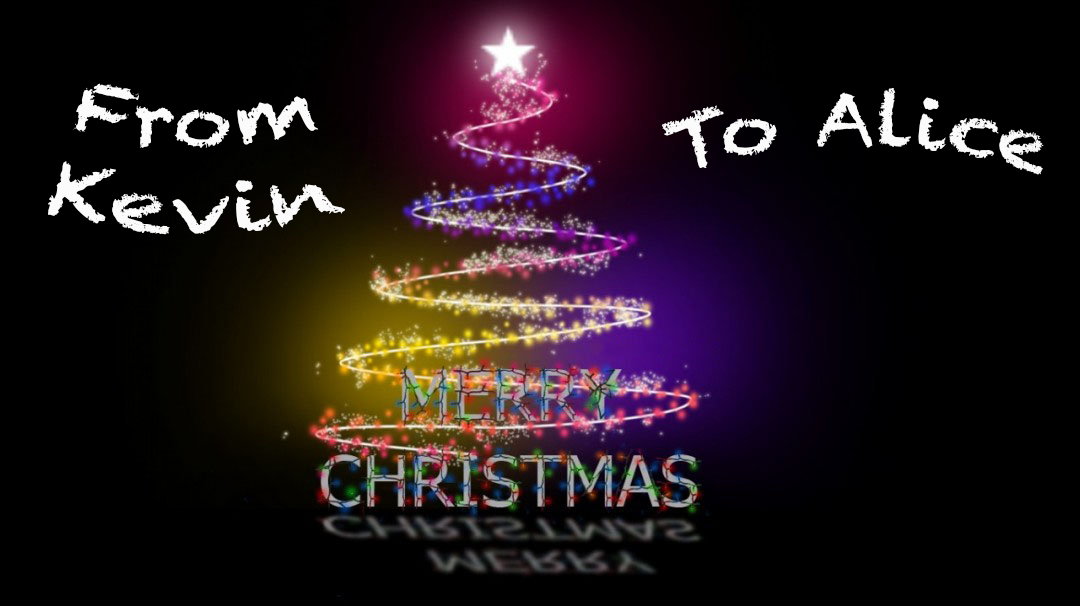
<style>
.page{position:relative;width:1080px;height:606px;background:#000000}
.page>*{position:absolute;margin:0}
.t1{font:72px "Chalkduster";color:#fbfbfb}
</style>
<div class="page">
<p class="t1" style="left:48px;top:83px;width:297px;height:152px">From<br>Kevin</p>
<p class="t1" style="left:662px;top:87px;width:382px;height:88px">To Alice</p>
</div>
